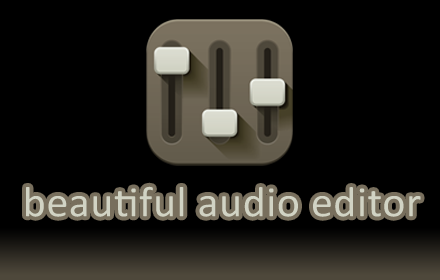
<style>
.page{position:relative;width:440px;height:280px;background:#000000}
.page>*{position:absolute;margin:0}
.t1{font:43px "Calibri";letter-spacing:0.01em;color:#d1d3c4}
</style>
<div class="page">
<p class="t1" style="left:26px;top:186px;width:395px;height:31px">beautiful audio editor</p>
</div>
